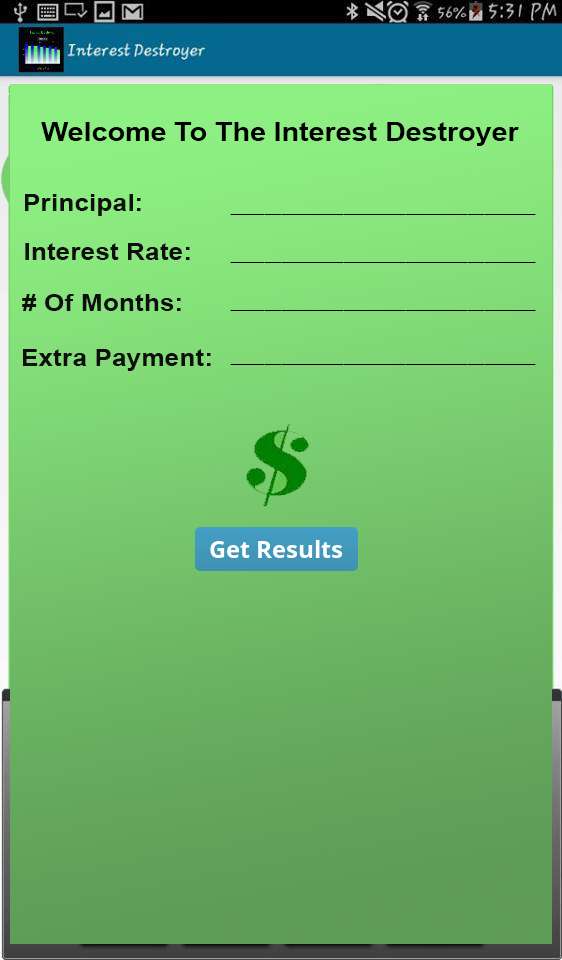
<style>
.page{position:relative;width:562px;height:960px}
.page>*{position:absolute;margin:0}
.t1{font:26px "Arial-BoldMT";color:#000000;scale:1.1 1}
.t2{font:24px "Arial-BoldMT";color:#0e0e0e;scale:1.1 1}
.t3{font:9.2px "Arial-BoldMT";color:#000000;scale:1.1 1}
</style>
<div class="page">
<p class="t1" style="left:41px;top:122px;width:478px;height:24px">Welcome To The Interest Destroyer</p>
<p class="t2" style="left:25px;top:194px;width:116px;height:22px">Principal:</p>
<p class="t3" style="left:230px;top:214px;width:306px;height:1px">______________________________________________________</p>
<p class="t2" style="left:25px;top:243px;width:165px;height:17px">Interest Rate:</p>
<p class="t3" style="left:230px;top:262px;width:306px;height:1px">______________________________________________________</p>
<p class="t2" style="left:22px;top:294px;width:159px;height:17px"># Of Months:</p>
<p class="t3" style="left:230px;top:310px;width:306px;height:1px">______________________________________________________</p>
<p class="t2" style="left:23px;top:349px;width:188px;height:22px">Extra Payment:</p>
<p class="t3" style="left:230px;top:364px;width:306px;height:1px">______________________________________________________</p>
</div>
